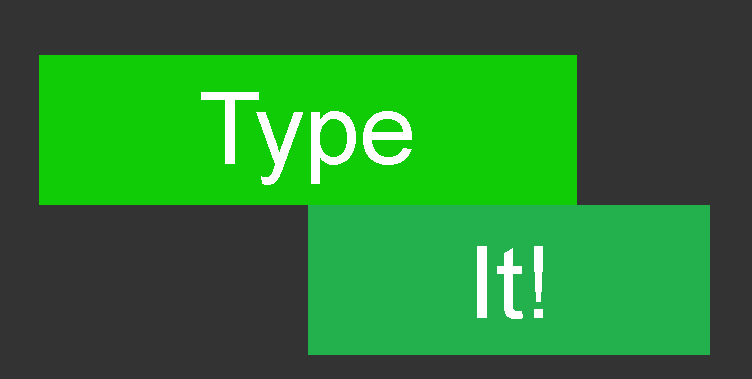
<style>
.page{position:relative;width:752px;height:379px;background:#333333}
.page>*{position:absolute;margin:0}
.t1{font:100px "ArialMT";color:#ffffff}
</style>
<div class="page">
<p class="t1" style="left:201px;top:92px;width:211px;height:93px">Type</p>
<p class="t1" style="left:477px;top:246px;width:66px;height:73px">It!</p>
</div>
